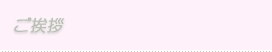
<style>
.page{position:relative;width:272px;height:52px;background:#fef1f9}
.page>*{position:absolute;margin:0}
.t1{font:16px "YentiEGP-Medium-SJIS";color:#bcbcbc;font-weight:bold;font-style:italic}
</style>
<div class="page">
<p class="t1" style="left:14px;top:17px;width:50px;height:16px">ご挨拶</p>
</div>
